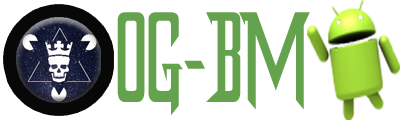
<style>
.page{position:relative;width:400px;height:120px;background:#ffffff}
.page>*{position:absolute;margin:0}
.t1{font:112.2px "DragonForcE";color:#64a24d;scale:0.69 1}
</style>
<div class="page">
<p class="t1" style="left:117px;top:12px;width:193px;height:103px">OG-BM</p>
</div>
